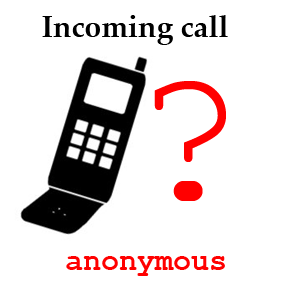
<style>
.page{position:relative;width:283px;height:283px;background:#ffffff}
.page>*{position:absolute;margin:0}
.t1{font:30px "PalatinoLinotype-Bold";color:#000000}
.t2{font:200px "CourierNewPSMT";color:#ff0000}
.t3{font:30px "CourierNewPS-BoldMT";color:#ff0000}
</style>
<div class="page">
<p class="t1" style="left:42px;top:15px;width:186px;height:30px">Incoming call</p>
<p class="t2" style="left:154px;top:81px;width:72px;height:120px">?</p>
<p class="t3" style="left:66px;top:256px;width:159px;height:20px">anonymous</p>
</div>
